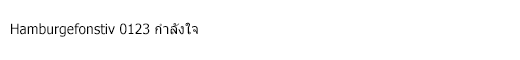
<style>
.page{position:relative;width:520px;height:60px;background:#ffffff}
.page>*{position:absolute;margin:0}
.t1{font:14px "Tahoma";color:#000000}
</style>
<div class="page">
<p class="t1" style="left:11px;top:22px;width:187px;height:15px">Hamburgefonstiv 0123 กำลังใจ</p>
</div>
